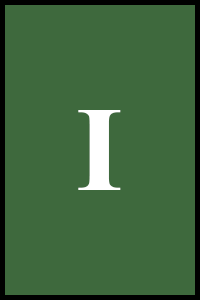
<style>
.page{position:relative;width:200px;height:300px;background:#3e693d}
.page>*{position:absolute;margin:0}
.t1{font:150px "Aparajita-Bold";color:#ffffff}
</style>
<div class="page">
<p class="t1" style="left:78px;top:110px;width:43px;height:80px">I</p>
</div>
